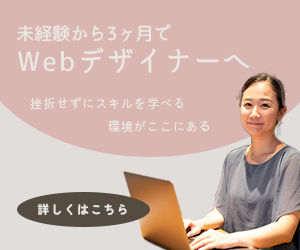
<style>
.page{position:relative;width:300px;height:250px;background:#d9b6b1}
.page>*{position:absolute;margin:0}
.t1{font:18px "irohamaru-mikami-Medium";color:#eae6e1}
.t2{font:27px "irohamaru-mikami-Medium";letter-spacing:0.08em;color:#eae6e1}
.t3{font:12px/22.4px "DNPShueiMGoStd-L";letter-spacing:0.08em;color:#eae6e1}
.t4{font:12px "ZenMaruGothic-Black";letter-spacing:0.1em;color:#eae6e1}
</style>
<div class="page">
<p class="t1" style="left:17px;top:24px;width:154px;height:18px">未経験から3ヶ月で</p>
<p class="t2" style="left:18px;top:47px;width:231px;height:27px">Webデザイナーへ</p>
<p class="t3" style="left:30px;top:97px;width:179px;height:36px">挫折せずにスキルを学べる<br>　　　　　　環境がここにある</p>
<p class="t4" style="left:37px;top:203px;width:90px;height:13px">詳しくはこちら</p>
</div>
